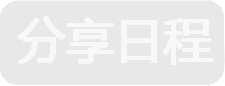
<style>
.page{position:relative;width:225px;height:86px;background:#e6e8e9}
.page>*{position:absolute;margin:0}
.t1{font:48px "MicrosoftYaHei";color:#f9f8f8;font-weight:bold}
</style>
<div class="page">
<p class="t1" style="left:17px;top:16px;width:196px;height:49px">分享日程</p>
</div>
